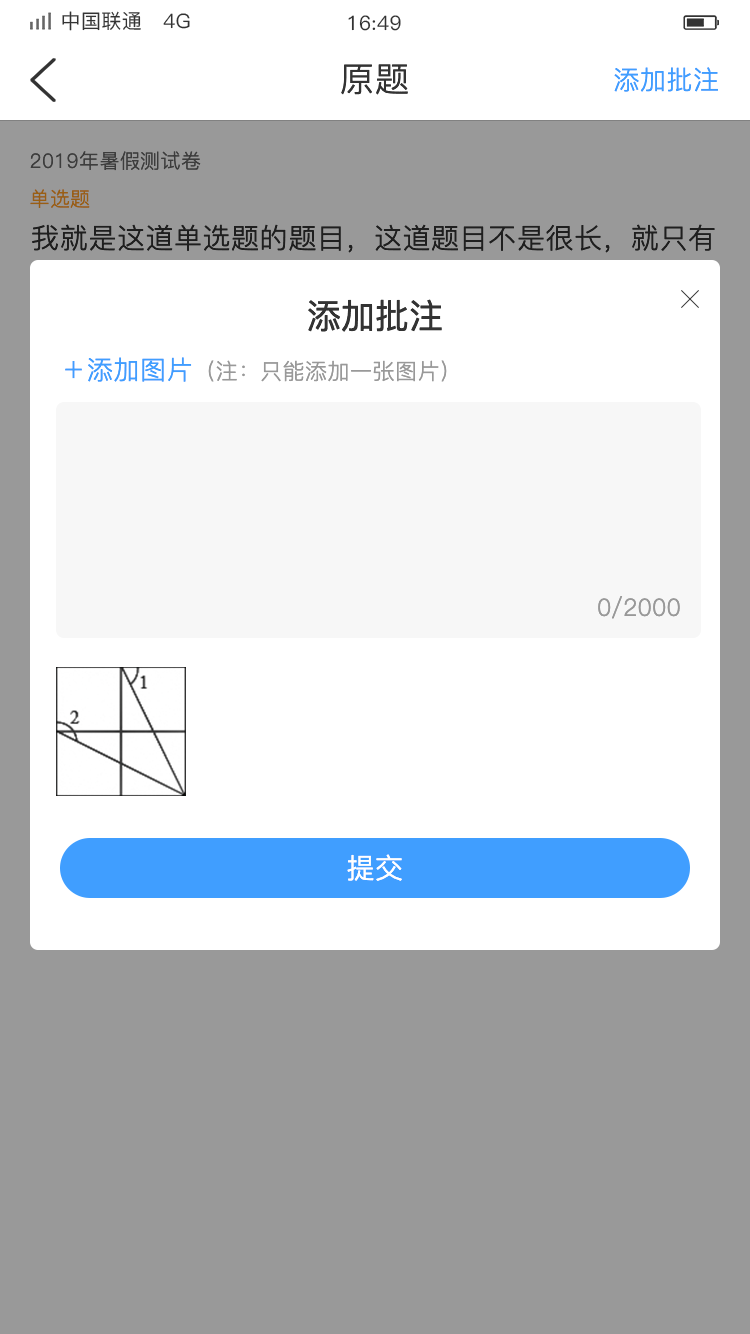
<style>
.page{position:relative;width:750px;height:1334px;background:#999999}
.page>*{position:absolute;margin:0}
.t1{font:20px "PingFang-SC-Medium";letter-spacing:0.02em;color:#333333}
.t2{font:34px "PingFang-SC-Regular";letter-spacing:0.02em;color:#333333}
.t3{font:26px "PingFang-SC-Regular";letter-spacing:0.02em;color:#409eff}
.t4{font:20px "PingFang-SC-Regular";letter-spacing:0.02em;color:#3d3d3d}
.t5{font:20px "PingFang-SC-Regular";letter-spacing:0.02em;color:#995f14}
.t6{font:28px/36px "PingFang-SC-Regular";letter-spacing:0.02em;color:#333333}
.t7{font:34px "PingFang-SC-Medium";color:#333333}
.t8{font:22px "PingFang-SC-Regular";letter-spacing:0.02em;color:#999999}
.t9{font:24px "PingFang-SC-Regular";color:#999999}
.t10{font:28px "PingFang-SC-Regular";letter-spacing:0.02em;color:#ffffff}
</style>
<div class="page">
<p class="t1" style="left:62px;top:11px;width:128px;height:20px">中国联通   4G</p>
<p class="t1" style="left:348px;top:15px;width:53px;height:16px">16:49</p>
<p class="t2" style="left:341px;top:64px;width:67px;height:31px">原题</p>
<p class="t3" style="left:614px;top:67px;width:104px;height:25px">添加批注</p>
<p class="t4" style="left:30px;top:151px;width:171px;height:20px">2019年暑假测试卷</p>
<p class="t5" style="left:30px;top:189px;width:60px;height:19px">单选题</p>
<p class="t6" style="left:32px;top:224px;width:683px;height:65px">我就是这道单选题的题目，这道题目不是很长，就只有这么一点点，你看看想选哪一个（    ）</p>
<p class="t7" style="left:308px;top:299px;width:134px;height:33px">添加批注</p>
<p class="t8" style="left:65px;top:357px;width:382px;height:25px"><span class="t3">＋添加图片</span>（注：只能添加一张图片）</p>
<p class="t9" style="left:598px;top:596px;width:82px;height:23px">0/2000</p>
<p class="t10" style="left:347px;top:854px;width:55px;height:27px">提交</p>
</div>
